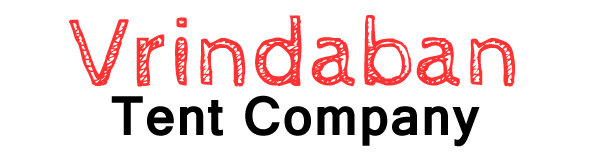
<style>
.page{position:relative;width:600px;height:155px;background:#ffffff}
.page>*{position:absolute;margin:0}
.t1{font:100px "CabinSketch-Regular";color:#ff3333}
.t2{font:48px "Arial-BoldMT";color:#000000}
.t3{font:60px "Vrinda-Bold";color:#000000}
</style>
<div class="page">
<p class="t1" style="left:69px;top:15px;width:446px;height:72px"><span class="t2">   </span>Vrindaban</p>
<p class="t3" style="left:111px;top:95px;width:369px;height:52px">Tent Company</p>
</div>
